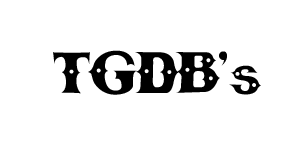
<style>
.page{position:relative;width:300px;height:150px;background:#ffffff}
.page>*{position:absolute;margin:0}
.t1{font:52px "CBGBFont";letter-spacing:0.02em;color:#000000}
</style>
<div class="page">
<p class="t1" style="left:53px;top:50px;width:208px;height:45px">TGDB’s</p>
</div>
